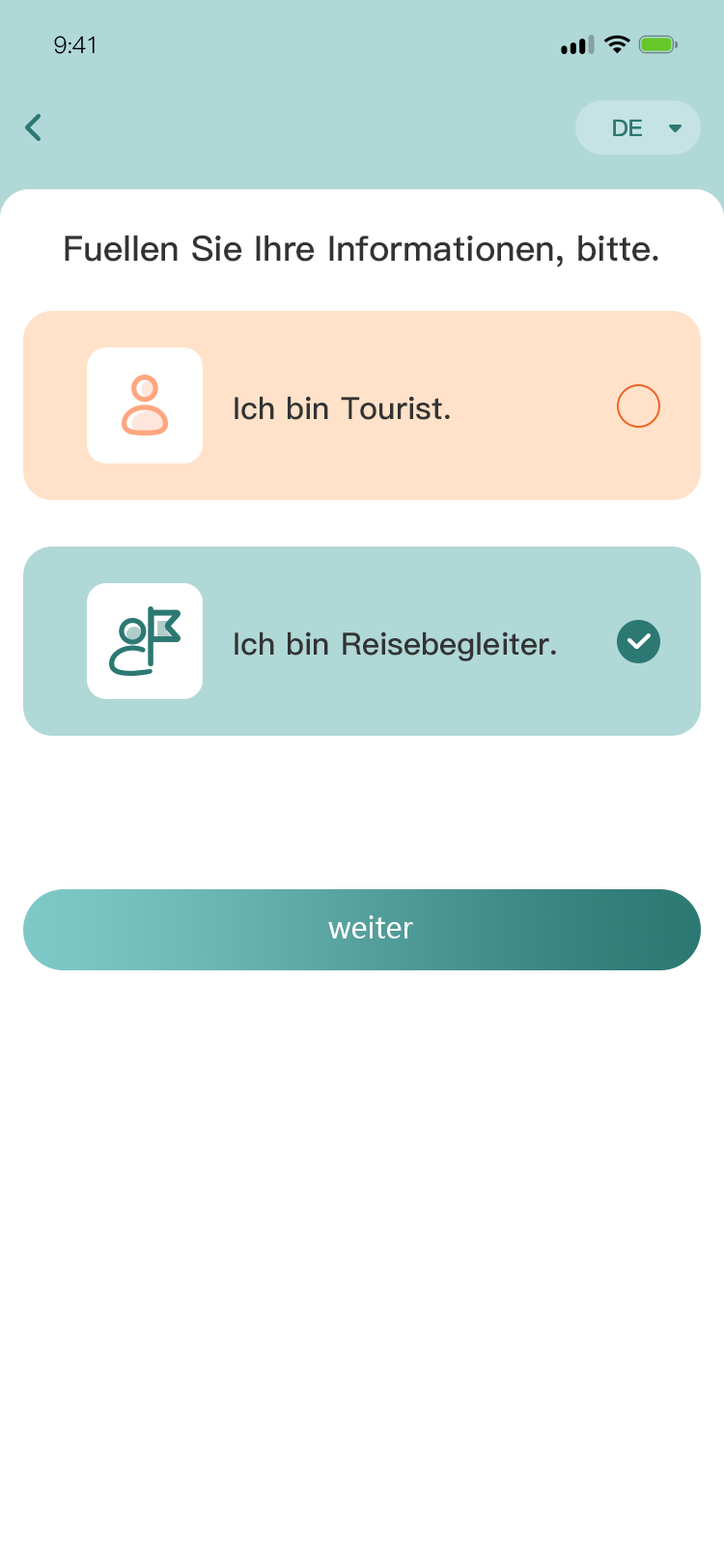
<style>
.page{position:relative;width:724px;height:1568px;background:#ffffff}
.page>*{position:absolute;margin:0}
.t1{font:23.2px "PingFang-SC-Regular";letter-spacing:-0.025em;color:#000000}
.t2{font:23.2px "PingFang-SC-Bold";color:#2c7873}
.t3{font:34.8px "PingFang-SC-Bold";color:#333333}
.t4{font:34.8px "PingFang-SC-Bold";color:#333333;text-transform:uppercase}
.t5{font:30.9px "PingFang-SC-Bold";color:#333333}
.t6{font:29px "MicrosoftYaHei";color:#ffffff}
</style>
<div class="page">
<p class="t1" style="left:54px;top:36px;width:41px;height:18px">9:41</p>
<p class="t2" style="left:613px;top:119px;width:29px;height:17px">DE</p>
<p class="t3" style="left:65px;top:235px;width:593px;height:32px"><span class="t4">F</span>uellen Sie Ihre Informationen, bitte.</p>
<p class="t5" style="left:235px;top:396px;width:215px;height:24px">Ich bin Tourist.</p>
<p class="t5" style="left:235px;top:631px;width:321px;height:30px">Ich bin Reisebegleiter.</p>
<p class="t6" style="left:328px;top:915px;width:85px;height:23px">weiter</p>
</div>
